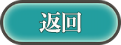
<style>
.page{position:relative;width:121px;height:45px}
.page>*{position:absolute;margin:0}
.t1{font:23px "RyuminPr6N-ExBold";color:#ffffff}
</style>
<div class="page">
<p class="t1" style="left:39px;top:12px;width:42px;height:21px">返回</p>
</div>
